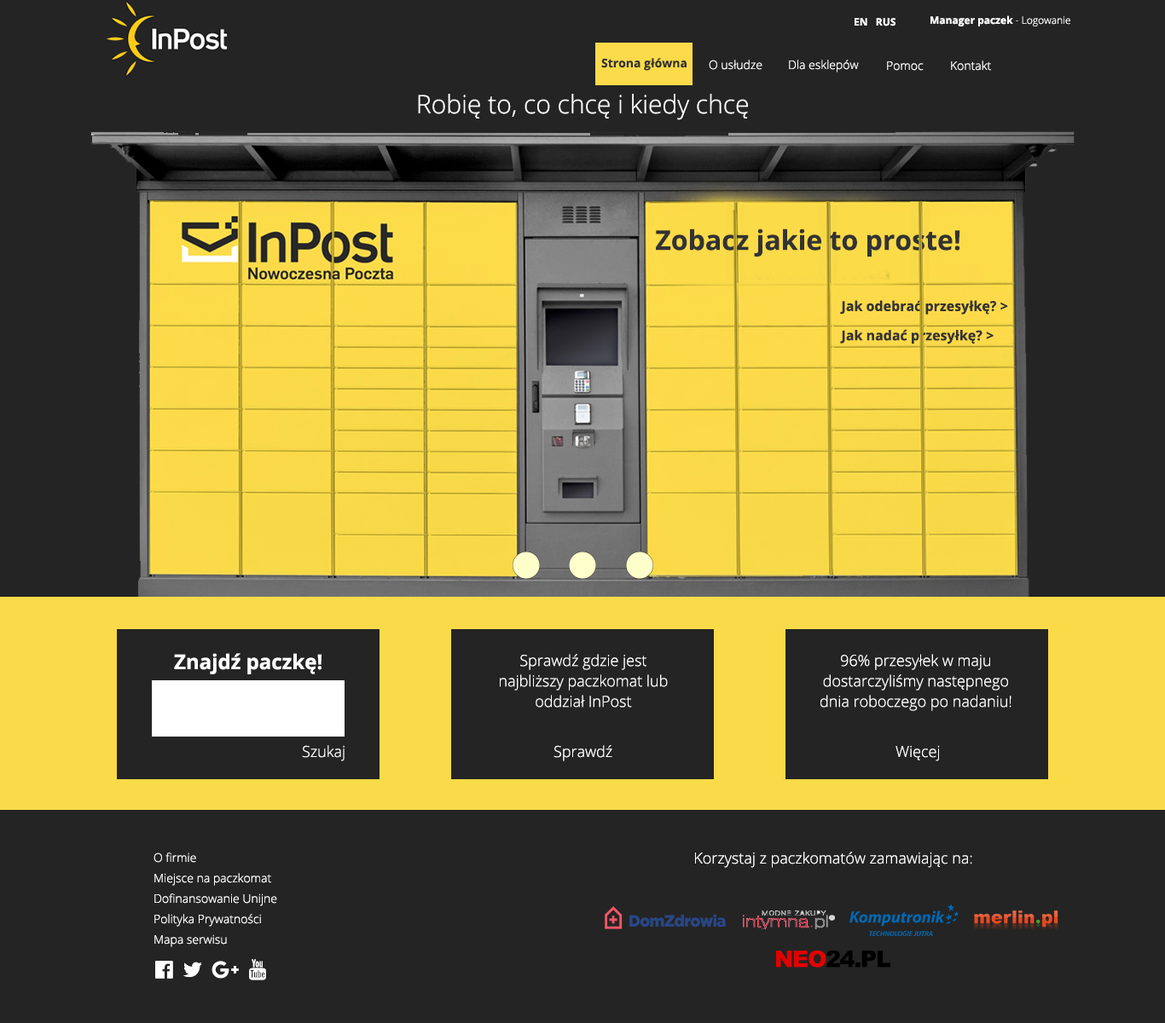
<style>
.page{position:relative;width:1165px;height:1023px;background:#242424}
.page>*{position:absolute;margin:0}
.t1{font:10.2px "OpenSans-Bold";color:#ffffff}
.t2{font:10.2px "OpenSans-Light";color:#ffffff}
.t3{font:11.9px "OpenSans-Bold";color:#333333}
.t4{font:11.9px "OpenSans-Light";color:#ffffff}
.t5{font:25.6px "OpenSans-Light";color:#ffffff}
.t6{font:27.3px "OpenSans-Bold";color:#333333}
.t7{font:13.6px "OpenSans-Bold";color:#333333}
.t8{font:20.5px "OpenSans-Bold";color:#ffffff}
.t9{font:15.4px/20.5px "OpenSans-Light";color:#ffffff}
.t10{font:15.4px "OpenSans-Light";color:#ffffff}
.t11{font:11.9px/20.5px "OpenSans-Light";color:#ffffff}
</style>
<div class="page">
<p class="t1" style="left:855px;top:18px;width:41px;height:8px">EN   RUS</p>
<p class="t1" style="left:931px;top:15px;width:139px;height:11px">Manager paczek<span class="t2"> - Logowanie</span></p>
<p class="t3" style="left:601px;top:58px;width:86px;height:13px">Strona główna</p>
<p class="t4" style="left:709px;top:60px;width:53px;height:10px">O usłudze</p>
<p class="t4" style="left:789px;top:60px;width:70px;height:12px">Dla esklepów</p>
<p class="t4" style="left:887px;top:61px;width:37px;height:10px">Pomoc</p>
<p class="t4" style="left:951px;top:61px;width:40px;height:10px">Kontakt</p>
<p class="t5" style="left:418px;top:94px;width:330px;height:26px">Robię to, co chcę i kiedy chcę</p>
<p class="t6" style="left:656px;top:229px;width:304px;height:28px">Zobacz jakie to proste!</p>
<p class="t7" style="left:840px;top:300px;width:168px;height:15px">Jak odebrać przesyłkę? &gt;</p>
<p class="t7" style="left:840px;top:329px;width:154px;height:16px">Jak nadać przesyłkę? &gt;</p>
<p class="t8" style="left:174px;top:653px;width:148px;height:22px">Znajdź paczkę!</p>
<p class="t9" style="left:500px;top:654px;width:168px;height:54px;text-align:center">Sprawdź gdzie jest najbliższy paczkomat lub oddział InPost</p>
<p class="t9" style="left:820px;top:654px;width:192px;height:57px;text-align:center">96% przesyłek w maju dostarczyliśmy następnego dnia roboczego po nadaniu!</p>
<p class="t10" style="left:302px;top:745px;width:43px;height:17px">Szukaj</p>
<p class="t10" style="left:554px;top:745px;width:58px;height:17px">Sprawdź</p>
<p class="t10" style="left:896px;top:745px;width:44px;height:17px">Więcej</p>
<p class="t11" style="left:154px;top:853px;width:123px;height:95px">O firmie<br>Miejsce na paczkomat<br>Dofinansowanie Unijne<br>Polityka Prywatności<br>Mapa serwisu</p>
<p class="t10" style="left:695px;top:852px;width:277px;height:16px">Korzystaj z paczkomatów zamawiając na:</p>
</div>
